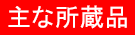
<style>
.page{position:relative;width:135px;height:35px;background:#ff0000}
.page>*{position:absolute;margin:0}
.t1{font:25px "MS-PGothic";color:#ffffff}
</style>
<div class="page">
<p class="t1" style="left:8px;top:5px;width:119px;height:24px">主な所蔵品</p>
</div>
